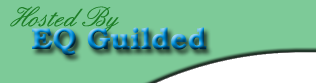
<style>
.page{position:relative;width:316px;height:83px;background:#7dca98}
.page>*{position:absolute;margin:0}
.t1{font:30px "Script-33Normal";color:#1e7f27}
.t2{font:30px "BookmanOldStyle-Bold"}
</style>
<div class="page">
<p class="t1" style="left:10px;top:6px;width:109px;height:28px">Hosted By</p>
<p class="t2" style="left:32px;top:27px;width:175px;height:29px">EQ Guilded</p>
</div>
